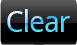
<style>
.page{position:relative;width:77px;height:45px;background:#000000}
.page>*{position:absolute;margin:0}
.t1{font:30px "DroidSans";letter-spacing:-0.04em}
</style>
<div class="page">
<p class="t1" style="left:7px;top:9px;width:63px;height:23px">Clear</p>
</div>
